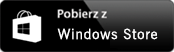
<style>
.page{position:relative;width:174px;height:52px;background:#000000}
.page>*{position:absolute;margin:0}
.t1{font:14.1px "NewsGothicBT-Roman";letter-spacing:0.06em;color:#ffffff}
</style>
<div class="page">
<p class="t1" style="left:57px;top:28px;width:101px;height:12px">Windows Store</p>
</div>
